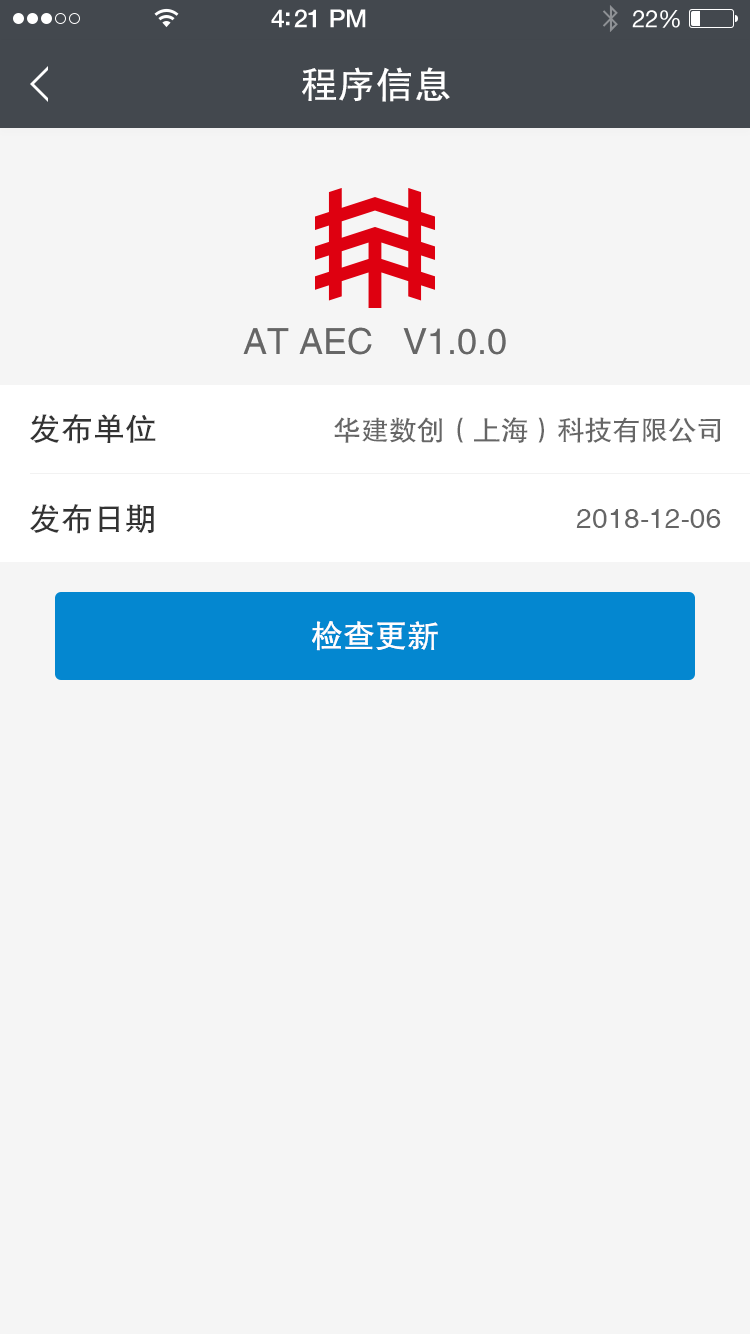
<style>
.page{position:relative;width:750px;height:1334px;background:#f5f5f5}
.page>*{position:absolute;margin:0}
.t1{font:38px "FZHTJW--GB1-0";color:#ffffff}
.t2{font:36px "FZHTJW--GB1-0";color:#666666}
.t3{font:32.1px "FZHTJW--GB1-0";color:#333333}
.t4{font:28px "FZHTJW--GB1-0";color:#666666}
.t5{font:28px "Helvetica";color:#666666}
.t6{font:32px "FZHTJW--GB1-0";color:#fffefe}
</style>
<div class="page">
<p class="t1" style="left:302px;top:67px;width:148px;height:35px">程序信息</p>
<p class="t2" style="left:243px;top:327px;width:263px;height:28px">AT AEC   V1.0.0</p>
<p class="t3" style="left:30px;top:414px;width:126px;height:30px">发布单位</p>
<p class="t4" style="left:334px;top:417px;width:387px;height:26px">华建数创（上海）科技有限公司</p>
<p class="t3" style="left:30px;top:504px;width:124px;height:30px">发布日期</p>
<p class="t5" style="left:576px;top:509px;width:145px;height:19px">2018-12-06</p>
<p class="t6" style="left:312px;top:621px;width:126px;height:30px">检查更新</p>
</div>
